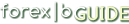
<style>
.page{position:relative;width:129px;height:24px;background:#ffffff}
.page>*{position:absolute;margin:0}
.t1{font:19.2px "Comfortaa";letter-spacing:0.022em;color:#ffffff}
.t2{font:19.2px "Comfortaa";letter-spacing:0.055em;color:#ffffff;font-weight:bold}
</style>
<div class="page">
<p class="t1" style="left:0px;top:1px;width:71px;height:20px">forex|b</p>
<p class="t2" style="left:74px;top:6px;width:56px;height:15px">GUIDE</p>
</div>
